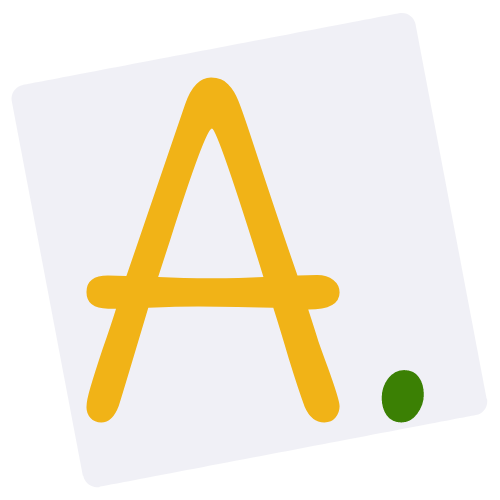
<style>
.page{position:relative;width:500px;height:500px;background:#f0f0f6}
.page>*{position:absolute;margin:0}
.t1{font:448px "Delius-Regular";color:#f1b317}
.t2{font:448px "Delius-Regular";color:#3b8004}
</style>
<div class="page">
<p class="t1" style="left:86px;top:77px;width:338px;height:346px">A<span class="t2">.</span></p>
</div>
